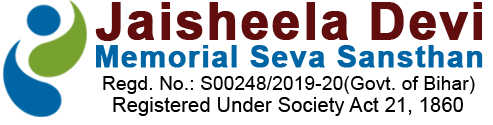
<style>
.page{position:relative;width:493px;height:125px;background:#ffffff}
.page>*{position:absolute;margin:0}
.t1{font:51px "Arial-BoldMT";letter-spacing:0.03em;color:#610d0d;font-weight:bold}
.t2{font:30px "Arial-BoldMT";letter-spacing:0.03em;color:#0065a4;font-weight:bold}
.t3{font:19px "ArialMT";letter-spacing:0.01em;color:#000000}
.t4{font:20px "ArialMT";letter-spacing:0.01em;color:#000000}
</style>
<div class="page">
<p class="t1" style="left:95px;top:2px;width:387px;height:39px">Jaisheela Devi</p>
<p class="t2" style="left:96px;top:45px;width:387px;height:23px">Memorial Seva Sansthan</p>
<p class="t3" style="left:103px;top:76px;width:372px;height:18px">Regd. No.: S00248/2019-20(Govt. of Bihar)</p>
<p class="t4" style="left:113px;top:97px;width:350px;height:19px">Registered Under Society Act 21, 1860</p>
</div>
